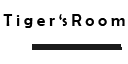
<style>
.page{position:relative;width:128px;height:64px;background:#ffffff}
.page>*{position:absolute;margin:0}
.t1{font:16.7px "BerlinSansFB-Reg";color:#000000}
</style>
<div class="page">
<p class="t1" style="left:3px;top:14px;width:122px;height:14px">T i g e r ‘s R o o m</p>
</div>
